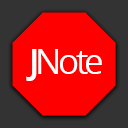
<style>
.page{position:relative;width:128px;height:128px;background:#ff0000}
.page>*{position:absolute;margin:0}
.t1{font:35px "OpenSans";letter-spacing:-0.105em;color:#ffffff}
.t2{font:35px "OpenSans-Semibold";letter-spacing:-0.105em;color:#ffffff}
</style>
<div class="page">
<p class="t1" style="left:26px;top:49px;width:76px;height:32px"><span class="t2">J</span>Note</p>
</div>
